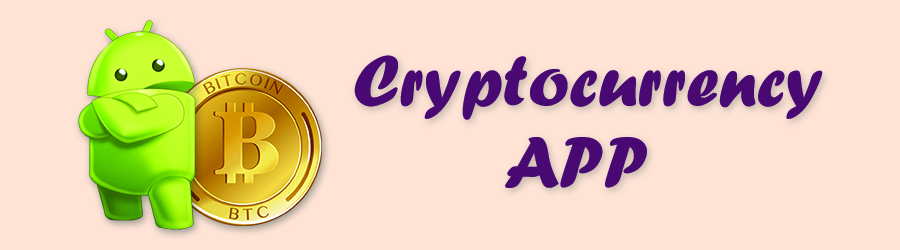
<style>
.page{position:relative;width:900px;height:250px;background:#ffe4d6}
.page>*{position:absolute;margin:0}
.t1{font:75px "ForteMT";color:#490a72}
</style>
<div class="page">
<p class="t1" style="left:354px;top:55px;width:469px;height:65px">Cryptocurrency</p>
<p class="t1" style="left:505px;top:137px;width:142px;height:51px">APP</p>
</div>
